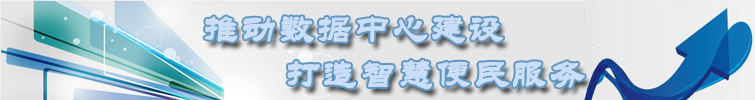
<style>
.page{position:relative;width:755px;height:100px}
.page>*{position:absolute;margin:0}
.t1{font:36px "STLiti";letter-spacing:0.025em;color:#cbdef8;font-weight:bold}
</style>
<div class="page">
<p class="t1" style="left:204px;top:15px;width:300px;height:29px">推动数据中心建设</p>
<p class="t1" style="left:287px;top:59px;width:298px;height:31px">打造智慧便民服务</p>
</div>
